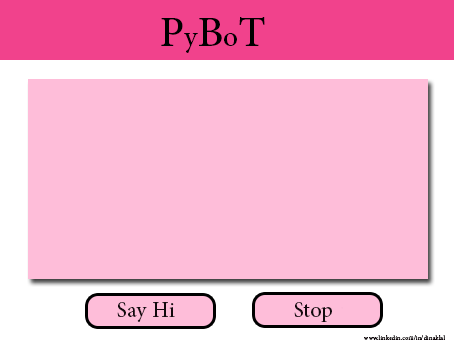
<style>
.page{position:relative;width:454px;height:340px;background:#febdd9}
.page>*{position:absolute;margin:0}
.t1{font:60px "AdobeArabic-Regular";color:#000000}
.t2{font:40px "AdobeArabic-Regular";color:#000000}
.t3{font:30px "AdobeArabic-Regular";color:#12090d}
.t4{font:9px "AdobeArabic-Regular";color:#12090d}
</style>
<div class="page">
<p class="t1" style="left:161px;top:17px;width:104px;height:36px">P<span class="t2">y</span>B<span class="t2">o</span>T</p>
<p class="t3" style="left:117px;top:302px;width:58px;height:20px">Say Hi</p>
<p class="t3" style="left:294px;top:302px;width:38px;height:20px">Stop</p>
<p class="t4" style="left:364px;top:335px;width:81px;height:5px">www.linkedin.com/in/dinaklal</p>
</div>
